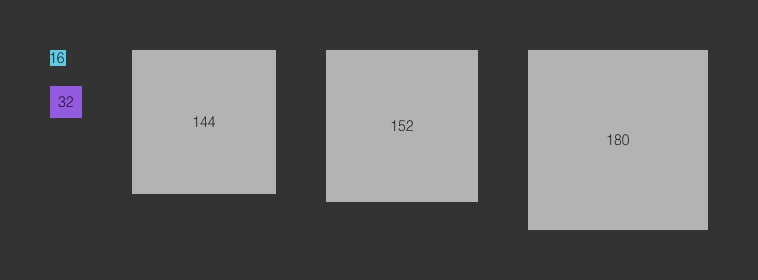
<style>
.page{position:relative;width:758px;height:280px;background:#333333}
.page>*{position:absolute;margin:0}
.t1{font:14px "Helvetica-Light";color:#13292d}
.t2{font:14px "Helvetica-Light";color:#1e122d}
.t3{font:14px "Helvetica-Light";color:#242424}
</style>
<div class="page">
<p class="t1" style="left:50px;top:52px;width:14px;height:12px">16</p>
<p class="t2" style="left:58px;top:96px;width:15px;height:12px">32</p>
<p class="t3" style="left:193px;top:116px;width:22px;height:11px">144</p>
<p class="t3" style="left:391px;top:120px;width:22px;height:12px">152</p>
<p class="t3" style="left:607px;top:134px;width:22px;height:12px">180</p>
</div>
